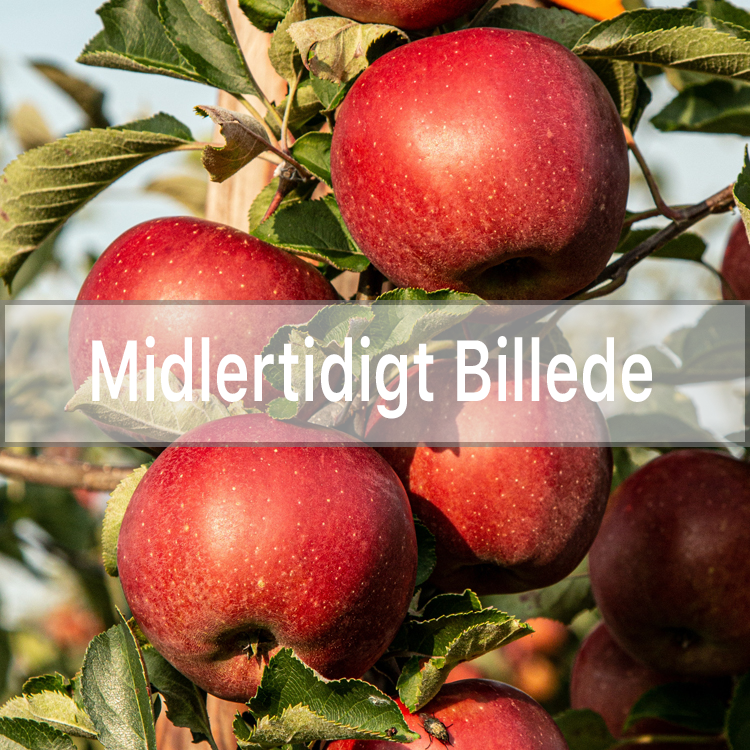
<style>
.page{position:relative;width:750px;height:750px}
.page>*{position:absolute;margin:0}
.t1{font:86px "SFProText-Semibold";color:#ffffff;scale:0.71 1}
</style>
<div class="page">
<p class="t1" style="left:92px;top:336px;width:560px;height:83px">Midlertidigt Billede</p>
</div>
